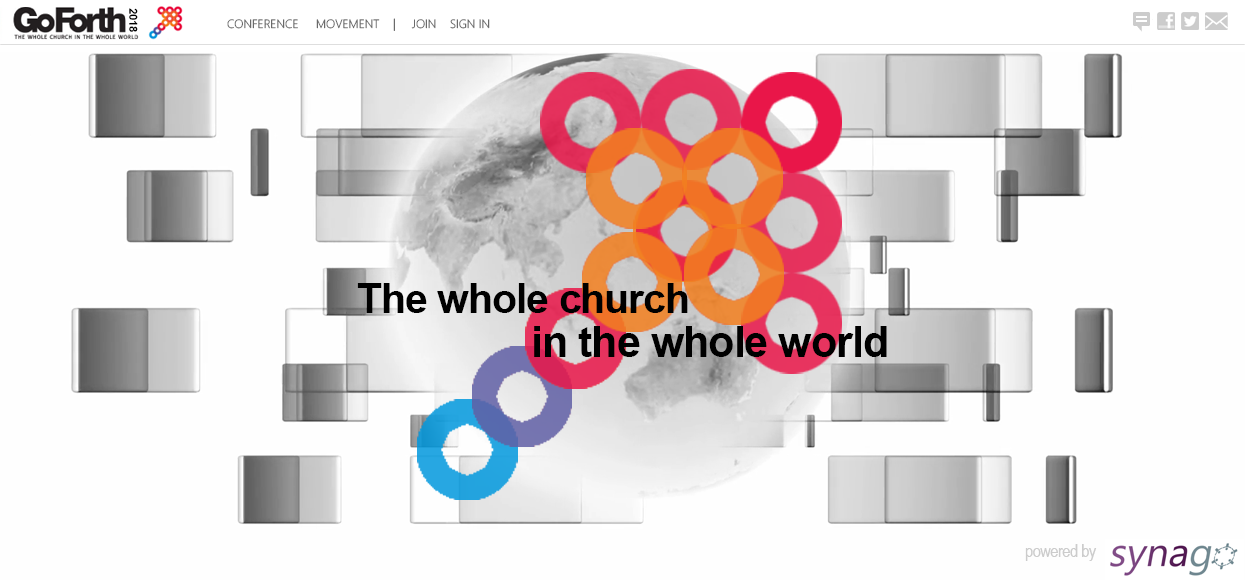
<style>
.page{position:relative;width:1245px;height:580px;background:#fefefe}
.page>*{position:absolute;margin:0}
.t1{font:11.3px "Arial-BoldMT";letter-spacing:-0.025em;color:#000000}
.t2{font:11.9px "SegoeUI-Light";color:#6a6a6a}
.t3{font:41.3px "Arial-BoldMT";letter-spacing:-0.025em;color:#000000}
.t4{font:42.9px "Arial-BoldMT";letter-spacing:-0.025em;color:#000000}
.t5{font:18px "ArialNarrow";letter-spacing:-0.025em;color:#cccccc}
</style>
<div class="page">
<p class="t1" style="left:129px;top:8px;width:9px;height:24px;rotate:90deg">2018</p>
<p class="t2" style="left:227px;top:19px;width:71px;height:10px">CONFERENCE</p>
<p class="t2" style="left:316px;top:19px;width:64px;height:10px">MOVEMENT</p>
<p class="t2" style="left:393px;top:18px;width:2px;height:13px">|</p>
<p class="t2" style="left:411px;top:19px;width:25px;height:10px">JOIN</p>
<p class="t2" style="left:450px;top:19px;width:40px;height:10px">SIGN IN</p>
<p class="t3" style="left:357px;top:283px;width:331px;height:30px">The whole church</p>
<p class="t4" style="left:534px;top:326px;width:353px;height:31px">in the whole world</p>
<p class="t5" style="left:1025px;top:544px;width:72px;height:17px">powered by</p>
</div>
